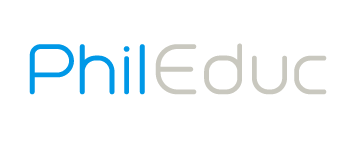
<style>
.page{position:relative;width:360px;height:144px;background:#ffffff}
.page>*{position:absolute;margin:0}
.t1{font:85px "Trench-Thin";color:#0098e7;font-weight:bold}
.t2{font:85px "Trench-Thin";color:#c9c8bf;font-weight:bold}
</style>
<div class="page">
<p class="t1" style="left:29px;top:43px;width:298px;height:52px">Phil<span class="t2">Educ</span></p>
</div>
